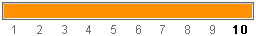
<style>
.page{position:relative;width:256px;height:36px;background:#ffffff}
.page>*{position:absolute;margin:0}
.t1{font:12px "ArialMT";letter-spacing:1.5em;color:#6d6d6d}
.t2{font:12px "ArialMT";letter-spacing:-0.04em;color:#6d6d6d}
.t3{font:12px "ArialMT";color:#000000;font-weight:bold}
</style>
<div class="page">
<p class="t1" style="left:12px;top:25px;width:234px;height:9px">123456789<span class="t2">10</span></p>
<p class="t3" style="left:233px;top:25px;width:14px;height:9px">10</p>
</div>
